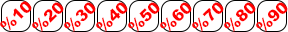
<style>
.page{position:relative;width:288px;height:32px;background:#ffffff}
.page>*{position:absolute;margin:0}
.t1{font:16px "Arial-Black";color:#ff0000}
</style>
<div class="page">
<p class="t1" style="left:0px;top:1px;width:32px;height:30px;rotate:-44deg">%10</p>
<p class="t1" style="left:32px;top:2px;width:32px;height:30px;rotate:-44deg">%20</p>
<p class="t1" style="left:64px;top:2px;width:32px;height:30px;rotate:-44deg">%30</p>
<p class="t1" style="left:96px;top:2px;width:32px;height:30px;rotate:-44deg">%40</p>
<p class="t1" style="left:128px;top:2px;width:32px;height:30px;rotate:-44deg">%50</p>
<p class="t1" style="left:160px;top:2px;width:32px;height:30px;rotate:-44deg">%60</p>
<p class="t1" style="left:192px;top:2px;width:32px;height:30px;rotate:-44deg">%70</p>
<p class="t1" style="left:224px;top:2px;width:32px;height:30px;rotate:-44deg">%80</p>
<p class="t1" style="left:256px;top:2px;width:32px;height:30px;rotate:-44deg">%90</p>
</div>
